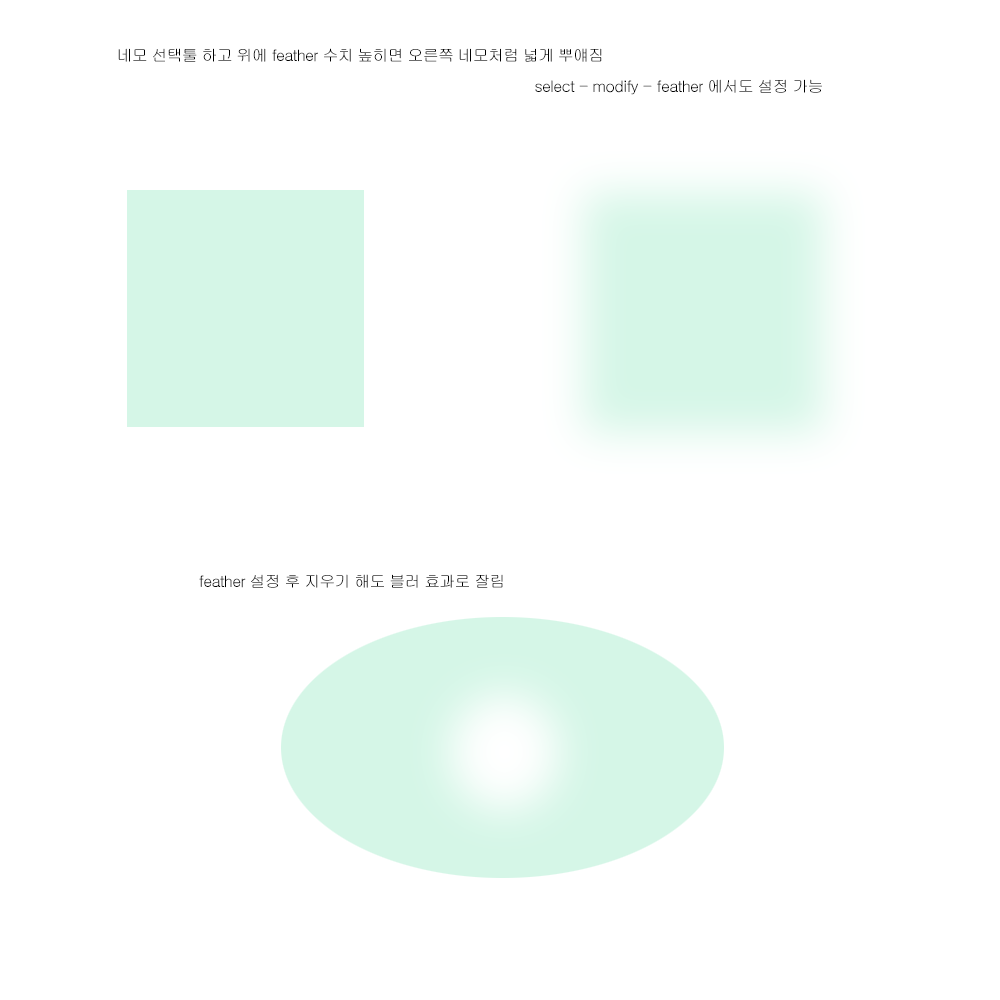
<style>
.page{position:relative;width:1000px;height:1000px;background:#ffffff}
.page>*{position:absolute;margin:0}
.t1{font:16px "Gulim";letter-spacing:-0.05em;color:#000000}
</style>
<div class="page">
<p class="t1" style="left:118px;top:48px;width:484px;height:14px">네모 선택툴 하고 위에 feather 수치 높히면 오른쪽 네모처럼 넓게 뿌얘짐</p>
<p class="t1" style="left:535px;top:79px;width:287px;height:16px">select - modify - feather 에서도 설정 가능</p>
<p class="t1" style="left:199px;top:574px;width:304px;height:14px">feather 설정 후 지우기 해도 블러 효과로 잘림</p>
</div>
